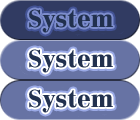
<style>
.page{position:relative;width:140px;height:120px;background:#6773a4}
.page>*{position:absolute;margin:0}
.t1{font:36px "TFPimpakarnExtra";color:#21304e}
</style>
<div class="page">
<p class="t1" style="left:29px;top:9px;width:84px;height:24px">System</p>
<p class="t1" style="left:29px;top:9px;width:84px;height:24px">System</p>
<p class="t1" style="left:29px;top:49px;width:84px;height:24px">System</p>
<p class="t1" style="left:29px;top:49px;width:84px;height:24px">System</p>
<p class="t1" style="left:29px;top:89px;width:84px;height:24px">System</p>
<p class="t1" style="left:29px;top:89px;width:84px;height:24px">System</p>
</div>
